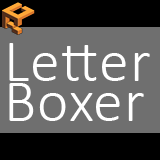
<style>
.page{position:relative;width:160px;height:160px;background:#6f6f6f}
.page>*{position:absolute;margin:0}
.t1{font:60px/40px "Calibri-Light";letter-spacing:0.02em;color:#ffffff}
</style>
<div class="page">
<p class="t1" style="left:9px;top:43px;width:141px;height:78px">Letter<br>Boxer</p>
</div>
